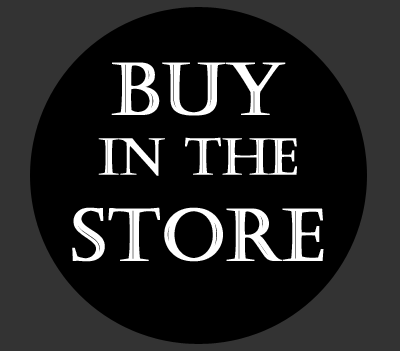
<style>
.page{position:relative;width:400px;height:351px;background:#000000}
.page>*{position:absolute;margin:0}
.t1{font:50px "Castellar";color:#ffffff;font-weight:bold}
.t2{font:72px "Castellar";color:#ffffff;font-weight:bold}
</style>
<div class="page">
<p class="t1" style="left:72px;top:62px;width:252px;height:200px;text-align:center"><span class="t2">Buy<br></span>IN THE<br><span class="t2">STORE</span></p>
</div>
